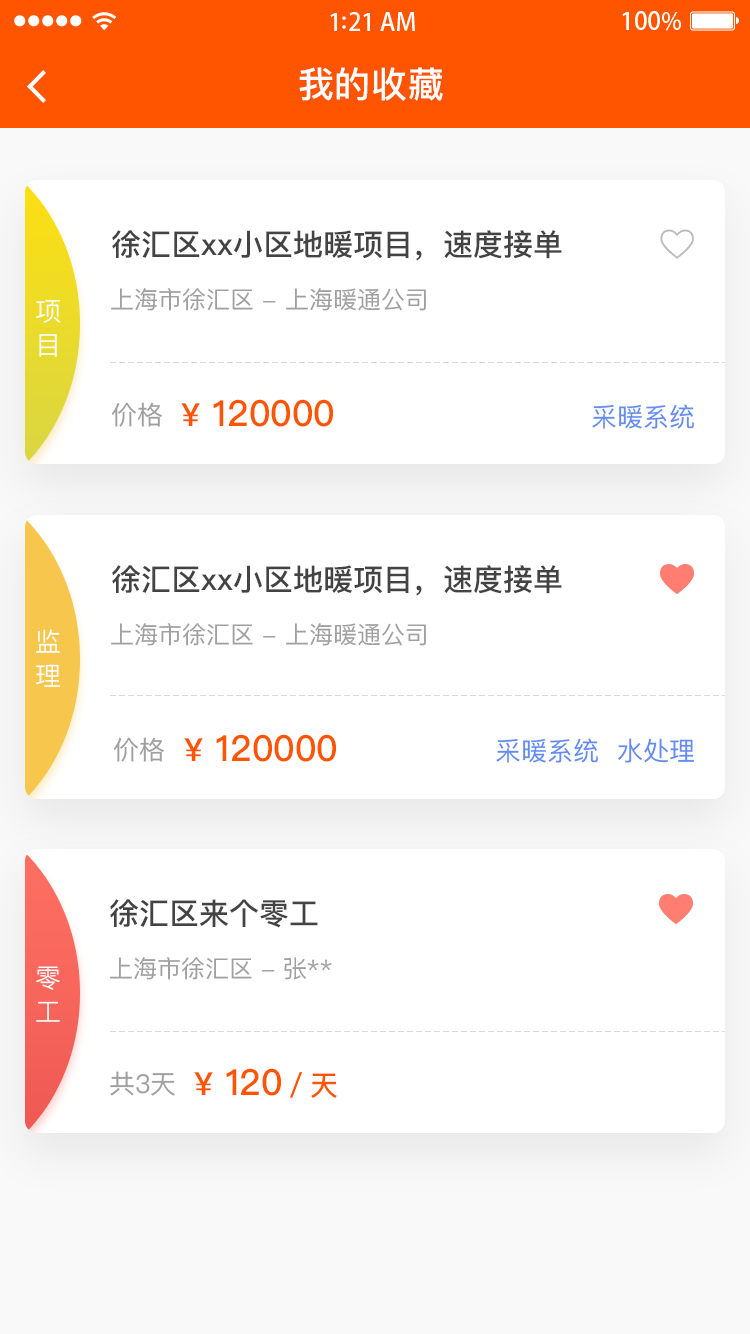
<style>
.page{position:relative;width:750px;height:1334px;background:#ffffff}
.page>*{position:absolute;margin:0}
.t1{font:36px "PingFangSC-Medium";letter-spacing:0.02em;color:#ffffff}
.t2{font:30px "PingFangSC-Medium";color:#434343}
.t3{font:24px "PingFangSC-Regular";color:#a0a0a0}
.t4{font:26px/8px "PingFangSC-Light";letter-spacing:0.34em;color:#ffffff}
.t5{font:36px "PingFangSC-Medium";color:#ff5400}
.t6{font:32px "PingFangSC-Medium";color:#ff5400}
.t7{font:26px "PingFangSC-Regular";color:#a0a0a0}
.t8{font:26px "PingFangSC-Regular";color:#648df4}
.t9{font:28px "PingFangSC-Medium";color:#ff5400}
</style>
<div class="page">
<p class="t1" style="left:299px;top:67px;width:144px;height:34px">我的收藏</p>
<p class="t2" style="left:112px;top:230px;width:450px;height:31px">徐汇区xx小区地暖项目，速度接单</p>
<p class="t3" style="left:111px;top:288px;width:315px;height:23px">上海市徐汇区 - 上海暖通公司</p>
<p class="t4" style="left:36px;top:300px;width:25px;height:57px;text-align:center">项目</p>
<p class="t5" style="left:181px;top:399px;width:152px;height:28px"><span class="t6">¥</span> 120000</p>
<p class="t7" style="left:111px;top:402px;width:51px;height:25px">价格</p>
<p class="t8" style="left:592px;top:404px;width:102px;height:25px">采暖系统</p>
<p class="t2" style="left:112px;top:565px;width:450px;height:31px">徐汇区xx小区地暖项目，速度接单</p>
<p class="t4" style="left:36px;top:629px;width:24px;height:58px;text-align:center">监理</p>
<p class="t3" style="left:111px;top:623px;width:315px;height:23px">上海市徐汇区 - 上海暖通公司</p>
<p class="t7" style="left:113px;top:737px;width:51px;height:25px">价格</p>
<p class="t5" style="left:184px;top:734px;width:152px;height:28px"><span class="t6">¥</span> 120000</p>
<p class="t8" style="left:496px;top:738px;width:198px;height:25px">采暖系统  水处理</p>
<p class="t2" style="left:110px;top:899px;width:208px;height:29px">徐汇区来个零工</p>
<p class="t4" style="left:36px;top:966px;width:24px;height:56px;text-align:center">零工</p>
<p class="t3" style="left:110px;top:957px;width:222px;height:23px">上海市徐汇区 - 张**</p>
<p class="t7" style="left:110px;top:1071px;width:65px;height:25px">共3天</p>
<p class="t5" style="left:194px;top:1068px;width:143px;height:30px"><span class="t6">¥</span> 120<span class="t9">／天</span></p>
</div>
